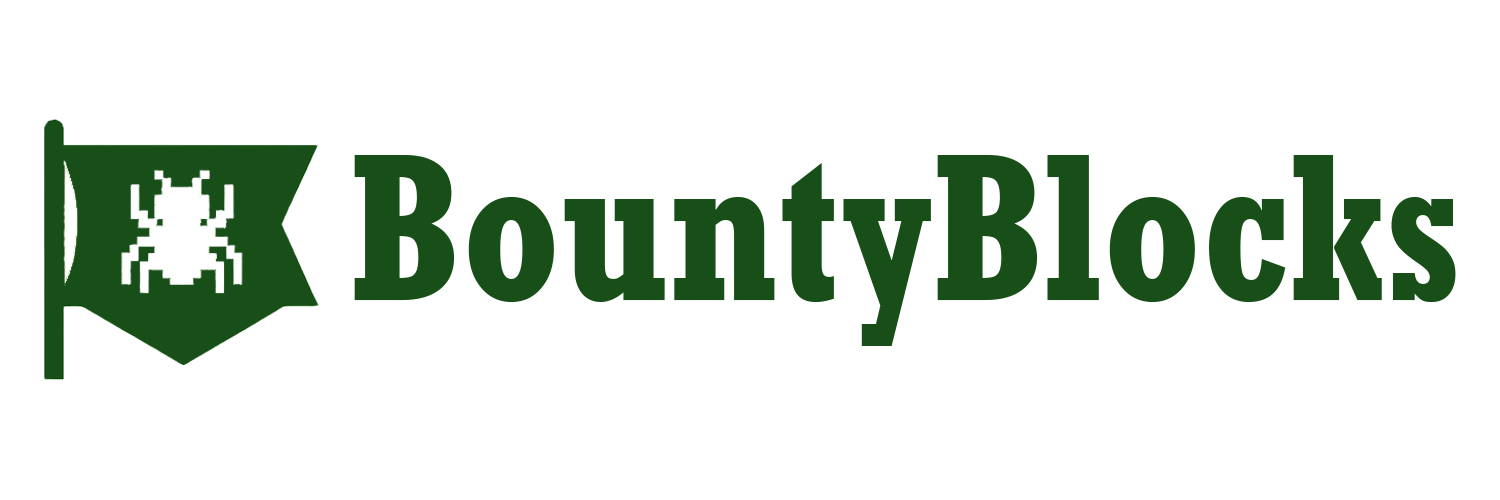
<style>
.page{position:relative;width:1500px;height:500px;background:#ffffff}
.page>*{position:absolute;margin:0}
.t1{font:206.5px "Rockwell-CondensedBold";color:#184f18}
</style>
<div class="page">
<p class="t1" style="left:354px;top:155px;width:1102px;height:191px">BountyBlocks</p>
</div>
